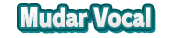
<style>
.page{position:relative;width:170px;height:38px;background:#ffffff}
.page>*{position:absolute;margin:0}
.t1{font:25.2px "RodinPro-UB";letter-spacing:-0.039em;color:#f0f0f1;scale:0.82 1}
</style>
<div class="page">
<p class="t1" style="left:21px;top:7px;width:130px;height:21px">Mudar Vocal</p>
</div>
